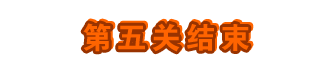
<style>
.page{position:relative;width:332px;height:74px;background:#ffffff}
.page>*{position:absolute;margin:0}
.t1{font:30px "Jdahei";letter-spacing:0.15em;color:#ff6400}
</style>
<div class="page">
<p class="t1" style="left:83px;top:23px;width:166px;height:29px">第五关结束</p>
</div>
